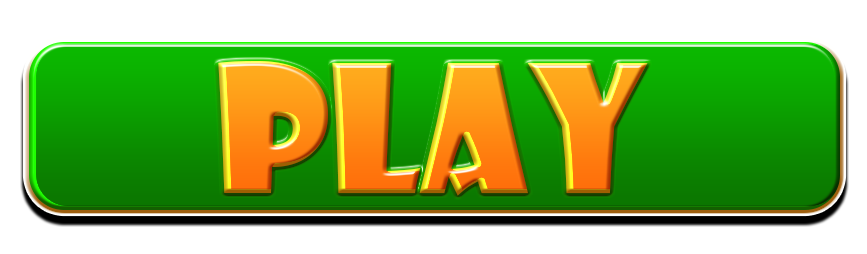
<style>
.page{position:relative;width:867px;height:254px;background:#ffffff}
.page>*{position:absolute;margin:0}
.t1{font:172.6px "ShowcardGothic-Reg"}
</style>
<div class="page">
<p class="t1" style="left:218px;top:61px;width:430px;height:135px">PLAY</p>
</div>
